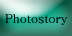
<style>
.page{position:relative;width:72px;height:36px}
.page>*{position:absolute;margin:0}
.t1{font:12px "Batang";color:#000000}
</style>
<div class="page">
<p class="t1" style="left:5px;top:14px;width:63px;height:11px">Photostory</p>
</div>
